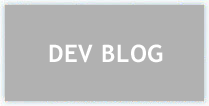
<style>
.page{position:relative;width:209px;height:106px;background:#b1b1b1}
.page>*{position:absolute;margin:0}
.t1{font:24px "TrebuchetMS-Bold";color:#ffffff}
</style>
<div class="page">
<p class="t1" style="left:49px;top:44px;width:114px;height:19px">DEV BLOG</p>
</div>
